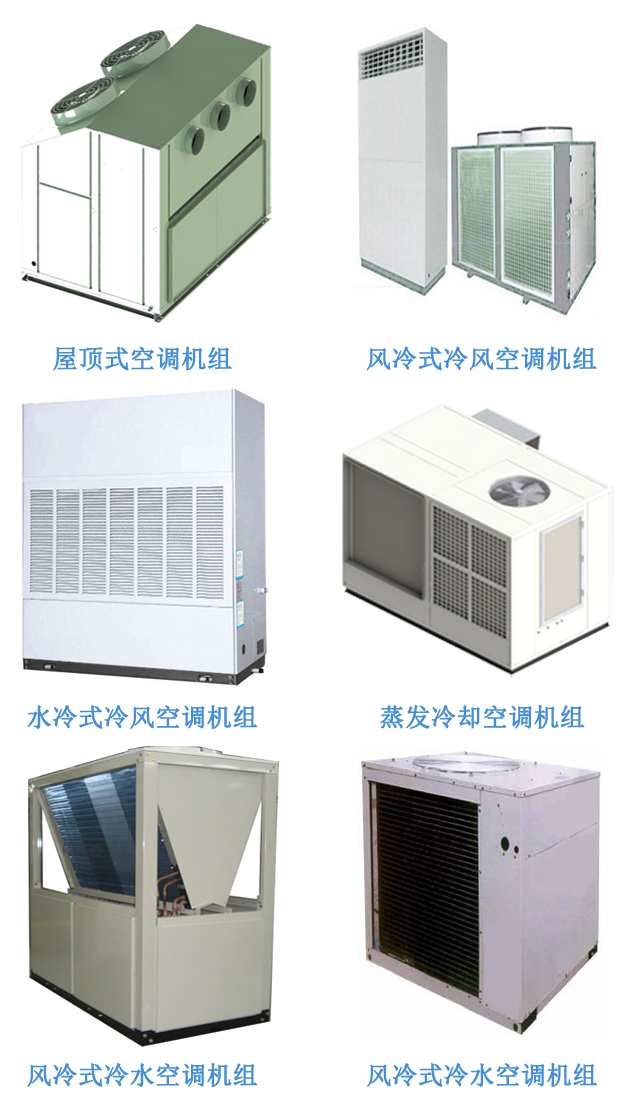
<style>
.page{position:relative;width:640px;height:1095px;background:#ffffff}
.page>*{position:absolute;margin:0}
.t1{font:25.1px "SimSun";color:#438edb;font-weight:bold}
</style>
<div class="page">
<p class="t1" style="left:53px;top:346px;width:179px;height:25px">屋顶式空调机组</p>
<p class="t1" style="left:366px;top:346px;width:231px;height:25px">风冷式冷风空调机组</p>
<p class="t1" style="left:27px;top:705px;width:231px;height:24px">水冷式冷风空调机组</p>
<p class="t1" style="left:380px;top:705px;width:205px;height:24px">蒸发冷却空调机组</p>
<p class="t1" style="left:27px;top:1062px;width:231px;height:25px">风冷式冷水空调机组</p>
<p class="t1" style="left:367px;top:1062px;width:230px;height:25px">风冷式冷水空调机组</p>
</div>
